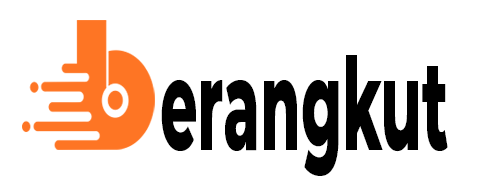
<style>
.page{position:relative;width:500px;height:180px;background:#ffffff}
.page>*{position:absolute;margin:0}
.t1{font:127.5px "Montserrat-ExtraBold";color:#000000;scale:0.46 1}
</style>
<div class="page">
<p class="t1" style="left:161px;top:55px;width:287px;height:121px">erangkut</p>
</div>
